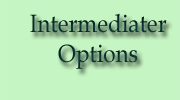
<style>
.page{position:relative;width:180px;height:100px;background:#c5f5c2}
.page>*{position:absolute;margin:0}
.t1{font:25px "BookAntiqua";color:#05332e;scale:0.9 1}
</style>
<div class="page">
<p class="t1" style="left:30px;top:13px;width:137px;height:56px;text-align:center">Intermediater<br>Options</p>
</div>
